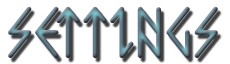
<style>
.page{position:relative;width:230px;height:64px;background:#ffffff}
.page>*{position:absolute;margin:0}
.t1{font:64px "ComicRunes"}
</style>
<div class="page">
<p class="t1" style="left:8px;top:6px;width:210px;height:52px">SETTINGS</p>
</div>
